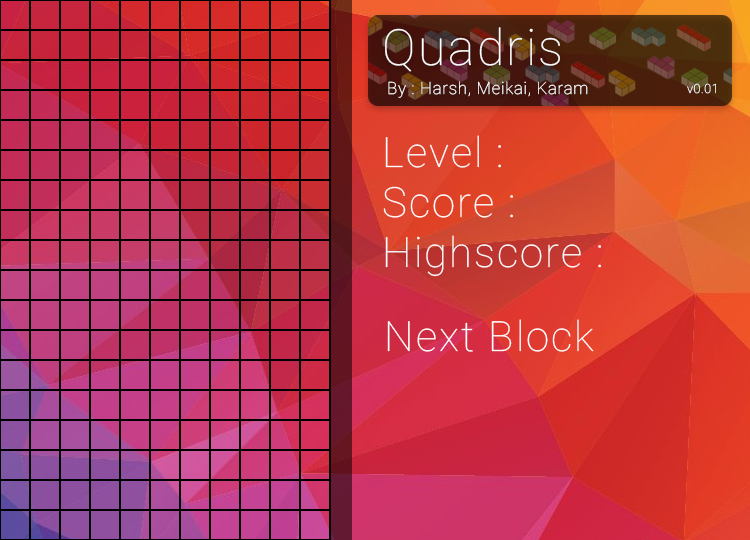
<style>
.page{position:relative;width:750px;height:540px}
.page>*{position:absolute;margin:0}
.t1{font:50px "Roboto-Thin";letter-spacing:0.05em;color:#fefefe}
.t2{font:16.7px "Roboto-Thin";letter-spacing:0.05em;color:#ffffff}
.t3{font:12.5px "Roboto-Thin";letter-spacing:0.05em;color:#ffffff}
.t4{font:41.7px "Roboto-Thin";letter-spacing:0.05em;color:#ffffff}
</style>
<div class="page">
<p class="t1" style="left:385px;top:27px;width:175px;height:45px">Quadris</p>
<p class="t2" style="left:388px;top:81px;width:200px;height:17px">By : Harsh, Meikai, Karam</p>
<p class="t3" style="left:687px;top:83px;width:29px;height:11px">v0.01</p>
<p class="t4" style="left:383px;top:135px;width:218px;height:142px">Level :<br>Score :<br>Highscore :</p>
<p class="t4" style="left:387px;top:319px;width:207px;height:33px">Next Block</p>
</div>
